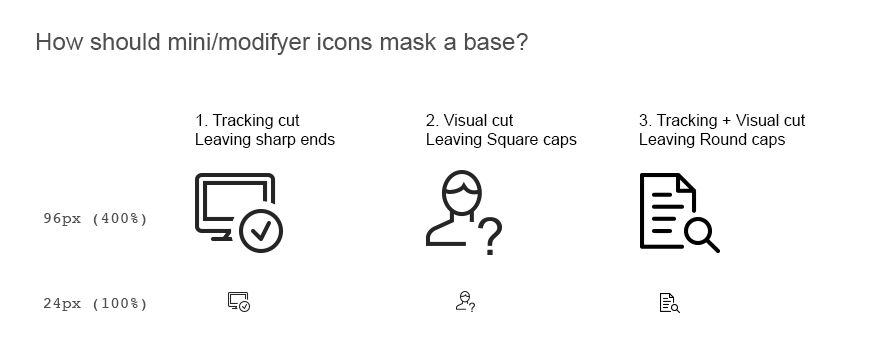
<style>
.page{position:relative;width:896px;height:364px;background:#ffffff}
.page>*{position:absolute;margin:0}
.t1{font:24px "ArialMT";color:#4f4f4f}
.t2{font:16.1px "ArialMT";color:#000000}
.t3{font:16.1px "Courier";color:#4f4f4f}
</style>
<div class="page">
<p class="t1" style="left:36px;top:33px;width:492px;height:22px">How should mini/modifyer icons mask a base?</p>
<p class="t2" style="left:196px;top:114px;width:139px;height:34px">1. Tracking cut<br>Leaving sharp ends</p>
<p class="t2" style="left:426px;top:114px;width:151px;height:34px">2. Visual cut<br>Leaving Square caps</p>
<p class="t2" style="left:639px;top:114px;width:167px;height:34px">3. Tracking + Visual cut<br>Leaving Round caps</p>
<p class="t3" style="left:44px;top:213px;width:102px;height:13px">96px (400%)</p>
<p class="t3" style="left:43px;top:298px;width:103px;height:13px">24px (100%)</p>
</div>
